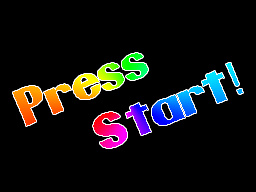
<style>
.page{position:relative;width:256px;height:192px;background:#000000}
.page>*{position:absolute;margin:0}
.t1{font:44.8px "Pretendo"}
.t2{font:44.8px "Verdana"}
</style>
<div class="page">
<p class="t1" style="left:13px;top:53px;width:230px;height:95px;text-align:center;rotate:-23deg">Press<br>     Start<span class="t2">!</span></p>
</div>
